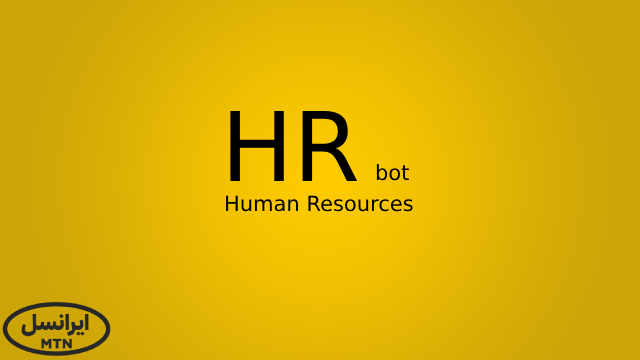
<style>
.page{position:relative;width:640px;height:360px}
.page>*{position:absolute;margin:0}
.t1{font:96px "DejaVuSans";color:#000000}
.t2{font:21px "DejaVuSans";color:#000000}
</style>
<div class="page">
<p class="t1" style="left:230px;top:111px;width:128px;height:70px">HR</p>
<p class="t2" style="left:376px;top:164px;width:33px;height:17px">bot</p>
<p class="t2" style="left:226px;top:195px;width:187px;height:17px">Human Resources</p>
</div>
